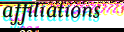
<style>
.page{position:relative;width:124px;height:32px;background:#ffffff}
.page>*{position:absolute;margin:0}
.t1{font:30px "MrsEavesItalic"}
</style>
<div class="page">
<p class="t1" style="left:2px;top:2px;width:99px;height:28px">affiliations</p>
</div>
